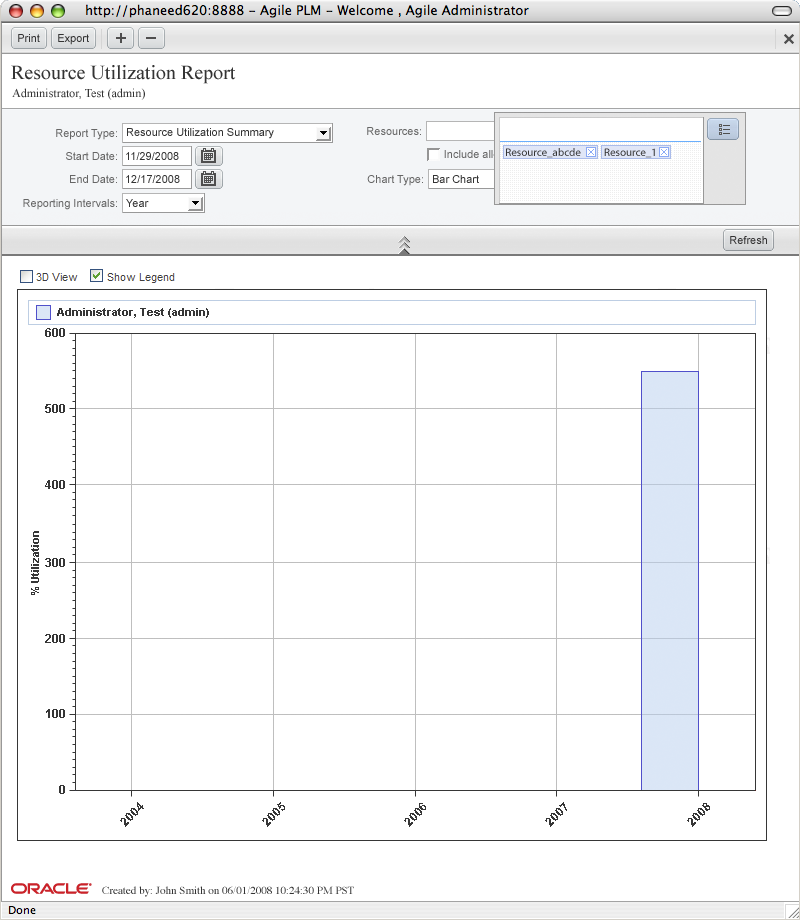
<style>
.page{position:relative;width:800px;height:920px;background:#ffffff}
.page>*{position:absolute;margin:0}
.t1{font:11px "ArialMT";color:#333333}
.t2{font:20px "TimesNewRomanPSMT";color:#333333}
.t3{font:12px "TimesNewRomanPSMT";color:#333333}
.t4{font:11px "ArialMT";color:#666666}
.t5{font:11px "MyriadPro-Regular";color:#333333}
.t6{font:11px "Times-Roman";color:#333333}
</style>
<div class="page">
<p class="t1" style="left:18px;top:34px;width:22px;height:8px">Print</p>
<p class="t1" style="left:58px;top:34px;width:31px;height:11px">Export</p>
<p class="t2" style="left:11px;top:65px;width:225px;height:19px">Resource Utilization Report</p>
<p class="t3" style="left:12px;top:88px;width:133px;height:12px">Administrator, Test (admin)</p>
<p class="t4" style="left:56px;top:129px;width:61px;height:11px">Report Type:</p>
<p class="t1" style="left:127px;top:128px;width:147px;height:11px">Resource Utilization Summary</p>
<p class="t4" style="left:367px;top:127px;width:54px;height:8px">Resources:</p>
<p class="t5" style="left:506px;top:148px;width:149px;height:10px">Resource_abcde          Resource_1</p>
<p class="t4" style="left:66px;top:152px;width:51px;height:8px">Start Date:</p>
<p class="t1" style="left:126px;top:152px;width:53px;height:8px">11/29/2008</p>
<p class="t4" style="left:70px;top:175px;width:47px;height:8px">End Date:</p>
<p class="t1" style="left:126px;top:175px;width:54px;height:8px">12/17/2008</p>
<p class="t4" style="left:367px;top:175px;width:56px;height:11px">Chart Type:</p>
<p class="t1" style="left:433px;top:175px;width:46px;height:8px">Bar Chart</p>
<p class="t4" style="left:23px;top:199px;width:94px;height:11px">Reporting Intervals:</p>
<p class="t1" style="left:126px;top:199px;width:23px;height:8px">Year</p>
<p class="t1" style="left:730px;top:236px;width:37px;height:8px">Refresh</p>
<p class="t6" style="left:102px;top:886px;width:252px;height:11px">Created by: John Smith on 06/01/2008 10:24:30 PM PST</p>
</div>
